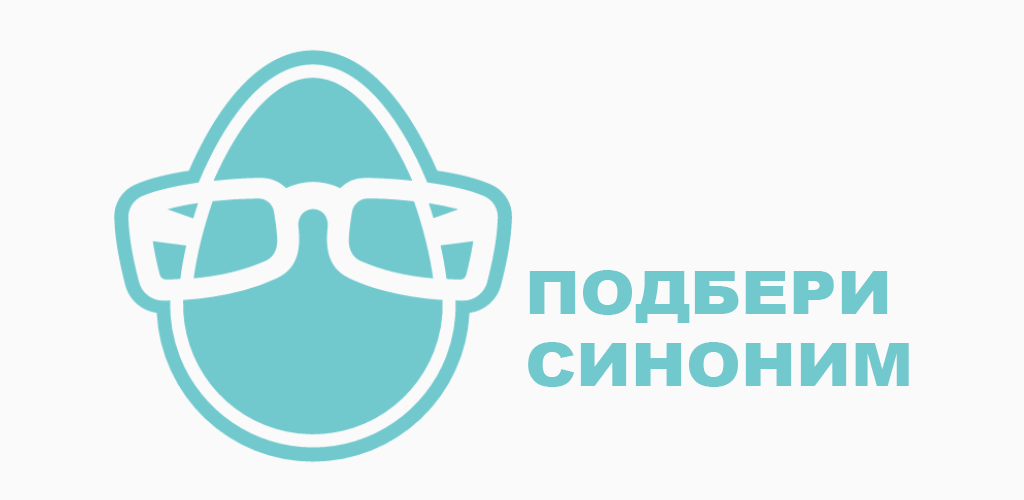
<style>
.page{position:relative;width:1024px;height:500px;background:#fafafa}
.page>*{position:absolute;margin:0}
.t1{font:60px "Arial-Black";color:#71c9ce;text-transform:uppercase;scale:1.1 1}
</style>
<div class="page">
<p class="t1" style="left:528px;top:270px;width:381px;height:117px">Подбери<br>синоним</p>
</div>
